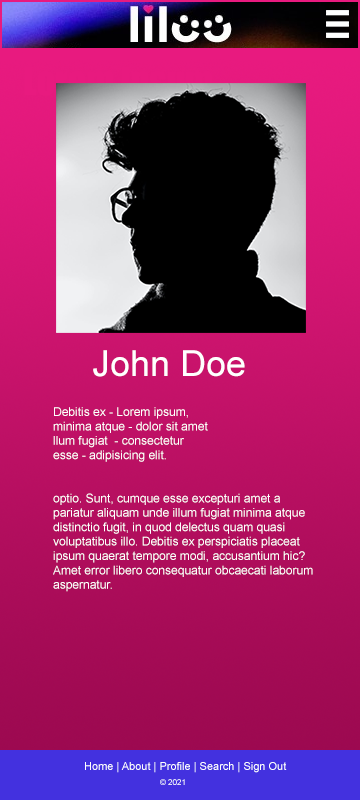
<style>
.page{position:relative;width:360px;height:800px}
.page>*{position:absolute;margin:0}
.t1{font:36px "ArialMT";color:#ffffff}
.t2{font:12px "ArialMT";color:#ffffff}
.t3{font:11px "ArialMT";color:#ffffff}
.t4{font:8px "ArialMT"}
</style>
<div class="page">
<p class="t1" style="left:93px;top:350px;width:152px;height:27px">John Doe</p>
<p class="t2" style="left:53px;top:407px;width:260px;height:185px">Debitis ex - Lorem ipsum, <br>minima atque - dolor sit amet <br>llum fugiat  - consectetur <br>esse - adipisicing elit. <br><br><br>optio. Sunt, cumque esse excepturi amet a <br>pariatur aliquam unde illum fugiat minima atque <br>distinctio fugit, in quod delectus quam quasi <br>voluptatibus illo. Debitis ex perspiciatis placeat <br>ipsum quaerat tempore modi, accusantium hic? <br>Amet error libero consequatur obcaecati laborum <br>aspernatur.</p>
<p class="t3" style="left:85px;top:762px;width:202px;height:11px">Home | About | Profile | Search | Sign Out</p>
<p class="t4" style="left:160px;top:779px;width:25px;height:6px">© 2021</p>
</div>
